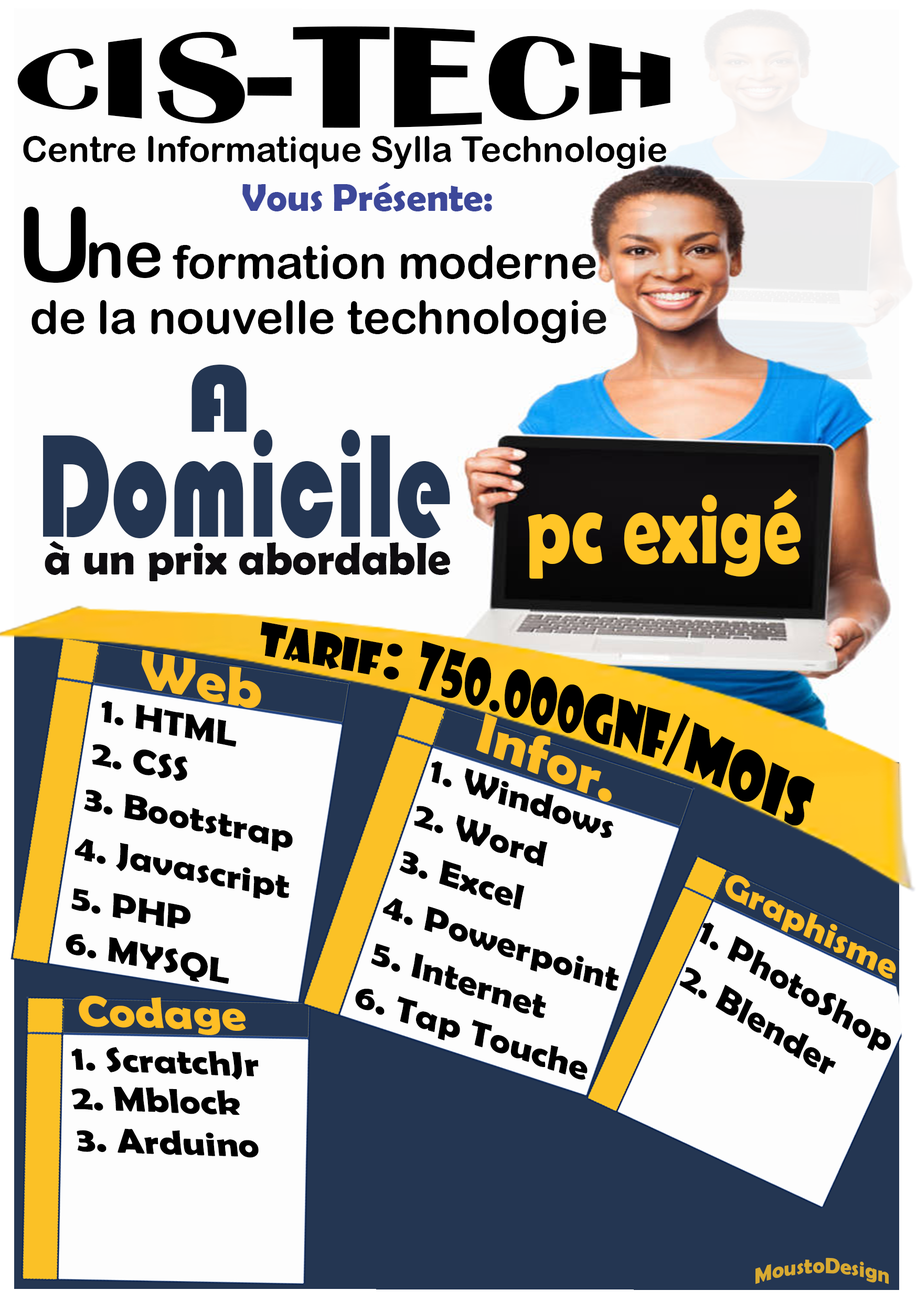
<style>
.page{position:relative;width:917px;height:1301px;background:#fdfdfd}
.page>*{position:absolute;margin:0}
.t1{font:60.8px "BritannicBold";color:#000000;scale:2.74 1}
.t2{font:35px "ArialRoundedMTBold";color:#000000}
.t3{font:39.3px "BerlinSansFBDemi-Bold";color:#3d489a}
.t4{font:102.7px "ArialRoundedMTBold";color:#000000}
.t5{font:65.6px "ArialRoundedMTBold";color:#000000}
.t6{font:45.9px "ArialRoundedMTBold";color:#000000}
.t7{font:98.2px "Bauhaus93";color:#243652;scale:1.15 1}
.t8{font:151.6px "Bauhaus93";color:#243652;scale:0.68 1}
.t9{font:101.5px "BerlinSansFBDemi-Bold";color:#ffc527;scale:0.76 1}
.t10{font:45.9px "BerlinSansFBDemi-Bold";color:#0f0d10}
.t11{font:44.1px "ShowcardGothic-Reg";color:#000000}
.t12{font:70.5px "ShowcardGothic-Reg";color:#000000}
.t13{font:63px "ShowcardGothic-Reg";color:#000000;scale:0.74 1}
.t14{font:54.5px "BerlinSansFBDemi-Bold";color:#febe25;scale:1.13 1}
.t15{font:35px "BerlinSansFBDemi-Bold";color:#000000;scale:1.13 1}
.t16{font:63.2px "ShowcardGothic-Reg";color:#000000;scale:0.91 1}
.t17{font:35px "BerlinSansFBDemi-Bold";color:#febe25;scale:1.13 1}
.t18{font:43.7px "BerlinSansFBDemi-Bold";color:#febe25;scale:1.13 1}
.t19{font:21.9px "BerlinSansFBDemi-Bold";color:#d8aa31}
</style>
<div class="page">
<p class="t1" style="left:17px;top:26px;width:653px;height:102px">CIS-TECH</p>
<p class="t2" style="left:23px;top:136px;width:643px;height:33px">Centre Informatique Sylla Technologie</p>
<p class="t3" style="left:242px;top:184px;width:81px;height:27px">Vous</p>
<p class="t3" style="left:334px;top:182px;width:158px;height:29px">Présente:</p>
<p class="t4" style="left:24px;top:207px;width:62px;height:76px">U</p>
<p class="t5" style="left:89px;top:242px;width:71px;height:36px">ne</p>
<p class="t6" style="left:173px;top:245px;width:423px;height:34px">formation moderne</p>
<p class="t6" style="left:31px;top:300px;width:575px;height:43px">de la nouvelle technologie</p>
<p class="t7" style="left:191px;top:365px;width:56px;height:67px">A</p>
<p class="t8" style="left:43px;top:430px;width:407px;height:108px">Domicile</p>
<p class="t9" style="left:528px;top:489px;width:273px;height:89px">pc exigé</p>
<p class="t10" style="left:45px;top:541px;width:405px;height:40px">à un prix abordable</p>
<p class="t11" style="left:260px;top:621px;width:142px;height:59px;rotate:10deg"><span class="t12"> <br>      </span>TARIF<span class="t12">:</span></p>
<p class="t13" style="left:419px;top:640px;width:271px;height:126px;rotate:16deg">750.000GNF/</p>
<p class="t14" style="left:141px;top:649px;width:120px;height:59px;rotate:11deg">Web</p>
<p class="t15" style="left:102px;top:701px;width:135px;height:46px;rotate:11deg">1. HTML</p>
<p class="t14" style="left:476px;top:713px;width:136px;height:89px;rotate:22deg">Infor.</p>
<p class="t16" style="left:683px;top:722px;width:132px;height:104px;rotate:27deg">mois</p>
<p class="t15" style="left:92px;top:744px;width:96px;height:37px;rotate:11deg">2. CSS</p>
<p class="t15" style="left:431px;top:760px;width:183px;height:78px;rotate:18deg">1. Windows</p>
<p class="t15" style="left:84px;top:789px;width:209px;height:63px;rotate:11deg">3. Bootstrap</p>
<p class="t15" style="left:414px;top:806px;width:134px;height:60px;rotate:18deg">2. Word</p>
<p class="t15" style="left:74px;top:839px;width:216px;height:60px;rotate:11deg">4. Javascript</p>
<p class="t15" style="left:399px;top:851px;width:125px;height:58px;rotate:18deg">3. Excel</p>
<p class="t17" style="left:725px;top:875px;width:171px;height:104px;rotate:27deg">Graphisme</p>
<p class="t15" style="left:71px;top:888px;width:120px;height:40px;rotate:11deg">5. PHP</p>
<p class="t15" style="left:382px;top:898px;width:237px;height:93px;rotate:18deg">4. Powerpoint</p>
<p class="t15" style="left:699px;top:922px;width:192px;height:129px;rotate:31deg">1. PhotoShop</p>
<p class="t15" style="left:66px;top:934px;width:163px;height:50px;rotate:11deg">6. MYSQL</p>
<p class="t15" style="left:371px;top:943px;width:175px;height:75px;rotate:18deg">5. Internet</p>
<p class="t15" style="left:679px;top:967px;width:157px;height:107px;rotate:32deg">2. Blender</p>
<p class="t15" style="left:355px;top:988px;width:232px;height:91px;rotate:18deg">6. Tap Touche</p>
<p class="t18" style="left:79px;top:995px;width:167px;height:40px;rotate:2deg">Codage</p>
<p class="t15" style="left:71px;top:1047px;width:188px;height:32px;rotate:2deg">1. ScratchJr</p>
<p class="t15" style="left:71px;top:1086px;width:188px;height:72px;rotate:2deg">2. Mblock<br>3. Arduino</p>
<p class="t19" style="left:755px;top:1257px;width:134px;height:27px">MoustoDesign</p>
</div>
